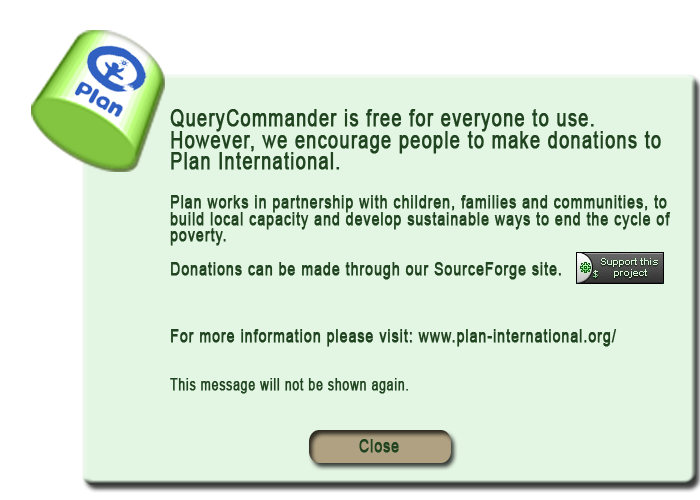
<style>
.page{position:relative;width:700px;height:500px;background:#e3f5e3}
.page>*{position:absolute;margin:0}
.t1{font:18.2px "ArialMT";letter-spacing:0.05em;color:#204420;font-weight:bold;scale:0.77 1}
.t2{font:23.4px "ArialMT";letter-spacing:0.05em;color:#204420;font-weight:bold;scale:0.77 1}
.t3{font:15.6px "ArialMT";letter-spacing:0.05em;color:#204420;font-weight:bold;scale:0.77 1}
</style>
<div class="page">
<p class="t1" style="left:170px;top:109px;width:501px;height:285px"><span class="t2">QueryCommander is free for everyone to use. <br>However, we encourage people to make donations to Plan International. <br><br></span>Plan works in partnership with children, families and communities, to build local capacity and develop sustainable ways to end the cycle of poverty.<br><br>Donations can be made through our SourceForge site. <br><br><br><br>For more information please visit: www.plan-international.org/<br><br><br><span class="t3">This message will not be shown again.</span></p>
<p class="t1" style="left:359px;top:439px;width:40px;height:14px">Close</p>
</div>
